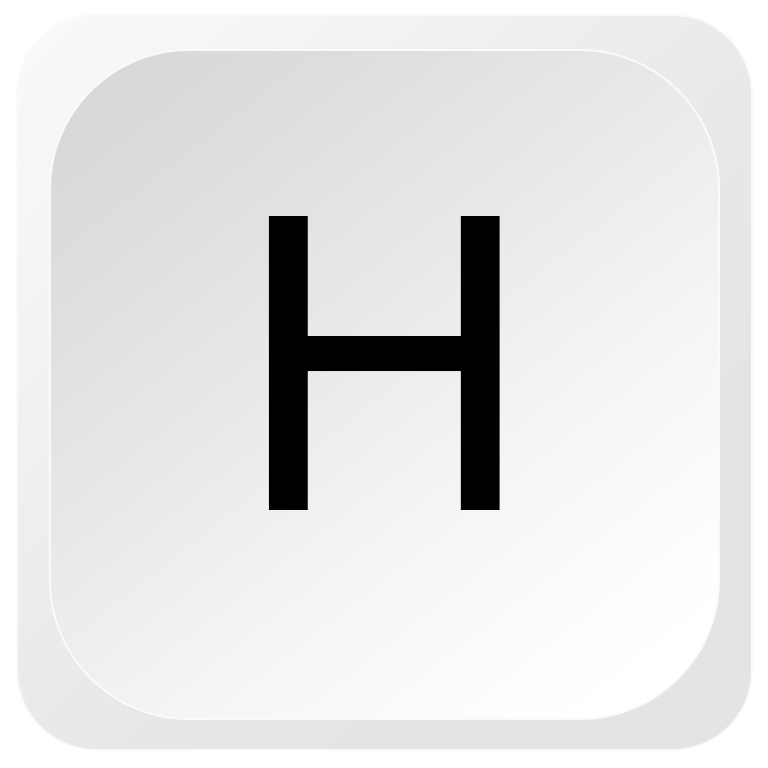
<style>
.page{position:relative;width:768px;height:768px}
.page>*{position:absolute;margin:0}
.t1{font:411px "ArialMT";color:#000000}
</style>
<div class="page">
<p class="t1" style="left:268px;top:216px;width:232px;height:294px">H</p>
</div>
